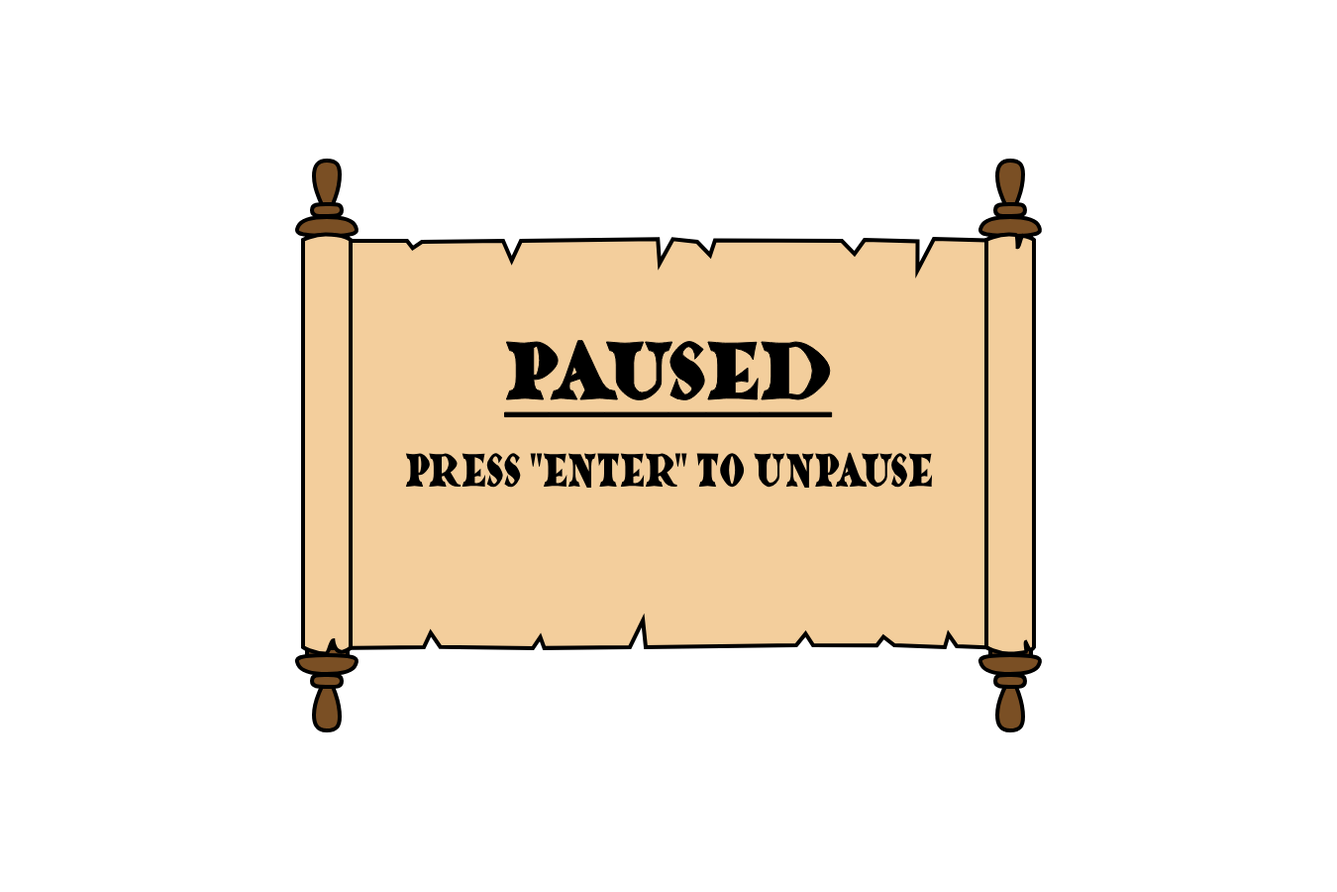
<style>
.page{position:relative;width:1337px;height:892px;background:#ffffff}
.page>*{position:absolute;margin:0}
.t1{font:89.1px "Dragonlands";color:#000000;text-decoration:underline;scale:0.84 1}
.t2{font:51.3px "Dragonlands";color:#000000;scale:0.68 1}
</style>
<div class="page">
<p class="t1" style="left:504px;top:340px;width:329px;height:78px">PAUSED</p>
<p class="t2" style="left:405px;top:452px;width:528px;height:36px">Press "ENTER" to unpause</p>
</div>
